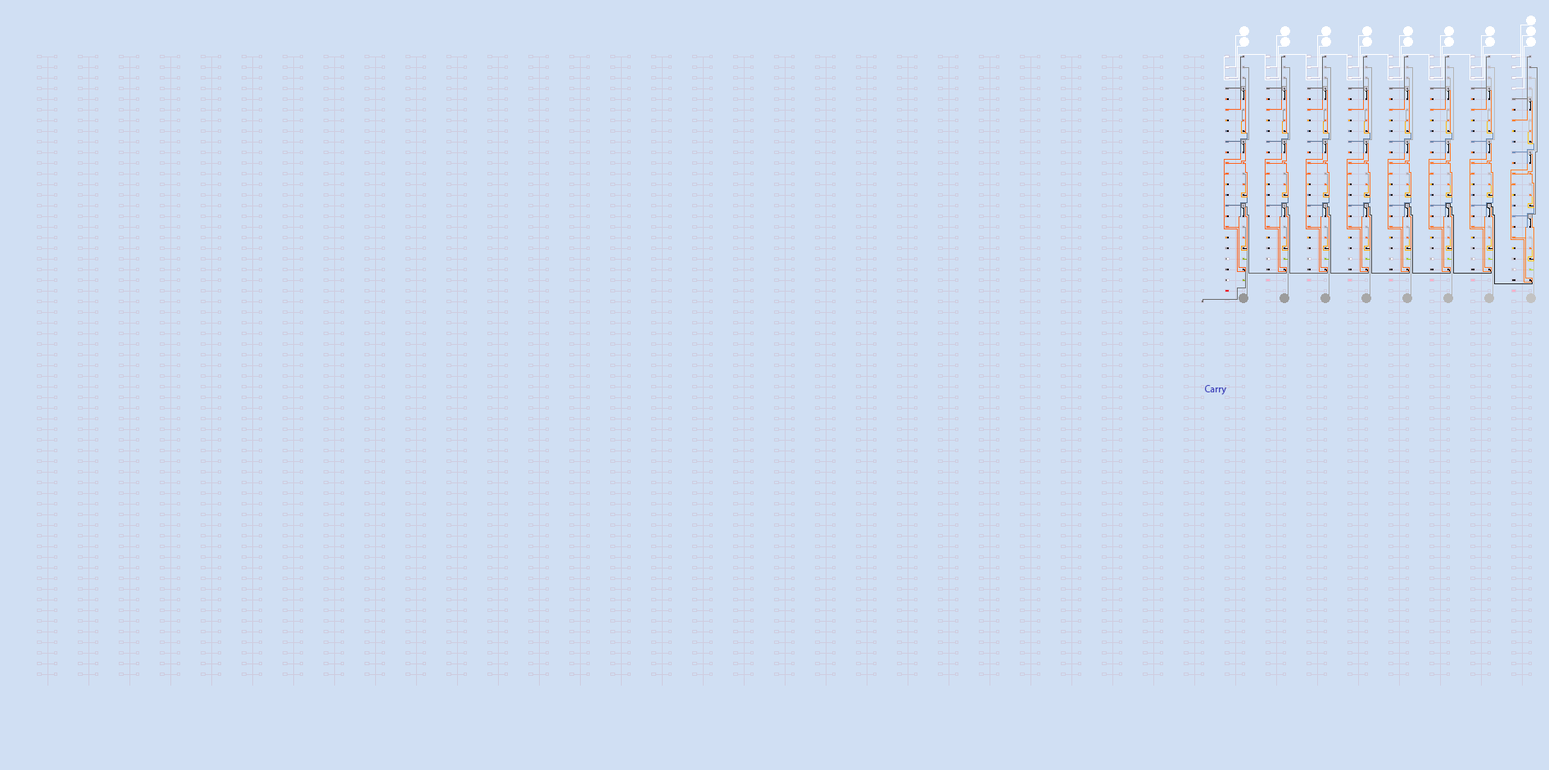
<style>
.page{position:relative;width:1549px;height:770px;background:#d0dff3}
.page>*{position:absolute;margin:0}
.t1{font:9.8px "MyriadPro-Regular";color:#4043bc}
</style>
<div class="page">
<p class="t1" style="left:1205px;top:385px;width:21px;height:10px">Carry</p>
</div>
